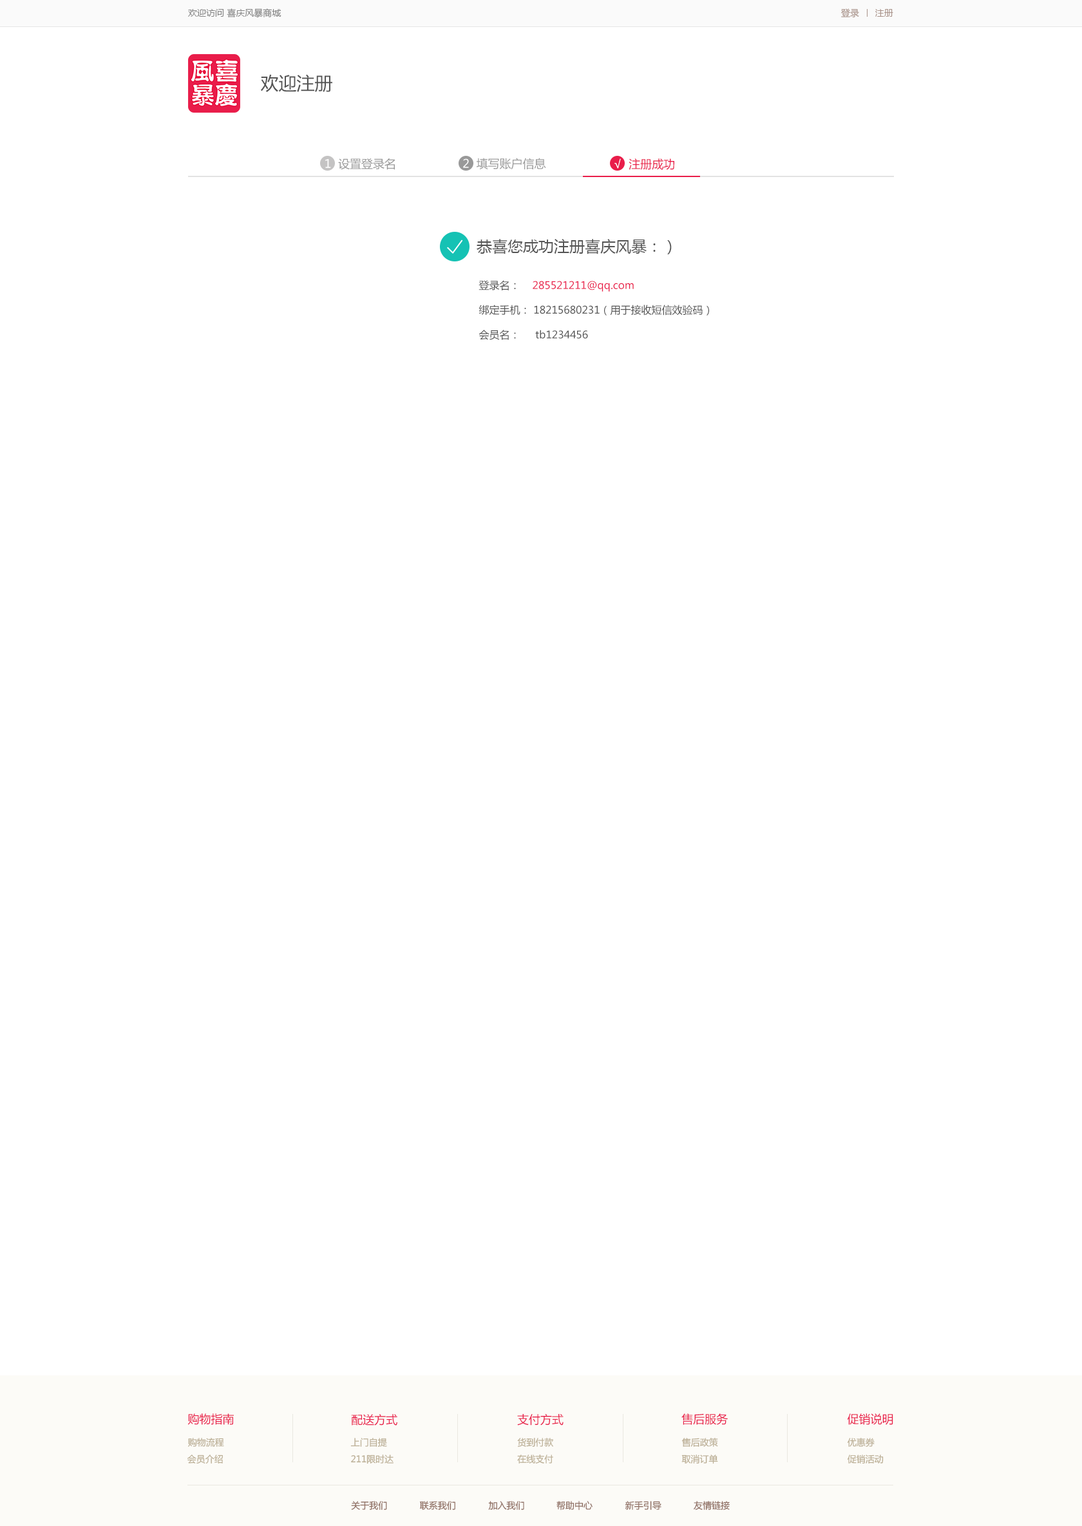
<style>
.page{position:relative;width:1082px;height:1526px;background:#ffffff}
.page>*{position:absolute;margin:0}
.t1{font:9px "MicrosoftYaHei";color:#848484}
.t2{font:9px "MicrosoftYaHei";color:#a99289}
.t3{font:18px "MicrosoftYaHei";color:#545454}
.t4{font:11.6px "MicrosoftYaHei";color:#999999}
.t5{font:11.6px "MicrosoftYaHei";color:#ffffff}
.t6{font:11.6px "MicrosoftYaHei";color:#e91d4a}
.t7{font:15.5px "MicrosoftYaHei";color:#545454}
.t8{font:10.3px "MicrosoftYaHei";color:#545454}
.t9{font:10.3px "MicrosoftYaHei";color:#e91d4a}
.t10{font:9px "MicrosoftYaHei";color:#baad93}
.t11{font:9px "MicrosoftYaHei";color:#8c6a5e}
</style>
<div class="page">
<p class="t1" style="left:188px;top:8px;width:93px;height:9px">欢迎访问 喜庆风暴商城</p>
<p class="t2" style="left:841px;top:8px;width:52px;height:9px">登录      注册</p>
<p class="t3" style="left:261px;top:74px;width:71px;height:18px">欢迎注册</p>
<p class="t4" style="left:325px;top:158px;width:70px;height:12px"><span class="t5">1  </span>设置登录名</p>
<p class="t4" style="left:463px;top:158px;width:83px;height:11px"><span class="t5">2  </span>填写账户信息</p>
<p class="t6" style="left:614px;top:158px;width:60px;height:12px"><span class="t5">√  </span>注册成功</p>
<p class="t7" style="left:477px;top:239px;width:195px;height:15px">恭喜您成功注册喜庆风暴：）</p>
<p class="t8" style="left:478px;top:280px;width:231px;height:60px">登录名：    <span class="t9">285521211@qq.com<br><br></span>绑定手机： 18215680231（用于接收短信效验码）<br><br>会员名：     tb1234456</p>
<p class="t6" style="left:187px;top:1413px;width:47px;height:12px">购物指南</p>
<p class="t6" style="left:351px;top:1414px;width:46px;height:12px">配送方式</p>
<p class="t6" style="left:517px;top:1414px;width:46px;height:12px">支付方式</p>
<p class="t6" style="left:681px;top:1413px;width:47px;height:12px">售后服务</p>
<p class="t6" style="left:847px;top:1413px;width:46px;height:12px">促销说明</p>
<p class="t10" style="left:188px;top:1438px;width:36px;height:9px">购物流程</p>
<p class="t10" style="left:350px;top:1438px;width:37px;height:9px">上门自提</p>
<p class="t10" style="left:517px;top:1438px;width:36px;height:10px">货到付款</p>
<p class="t10" style="left:681px;top:1438px;width:37px;height:9px">售后政策</p>
<p class="t10" style="left:847px;top:1438px;width:27px;height:9px">优惠券</p>
<p class="t10" style="left:187px;top:1455px;width:36px;height:9px">会员介绍</p>
<p class="t10" style="left:351px;top:1455px;width:43px;height:9px">211限时达</p>
<p class="t10" style="left:517px;top:1455px;width:36px;height:9px">在线支付</p>
<p class="t10" style="left:681px;top:1455px;width:37px;height:9px">取消订单</p>
<p class="t10" style="left:847px;top:1455px;width:37px;height:9px">促销活动</p>
<p class="t11" style="left:351px;top:1501px;width:36px;height:9px">关于我们</p>
<p class="t11" style="left:419px;top:1501px;width:36px;height:9px">联系我们</p>
<p class="t11" style="left:488px;top:1501px;width:36px;height:9px">加入我们</p>
<p class="t11" style="left:556px;top:1501px;width:36px;height:10px">帮助中心</p>
<p class="t11" style="left:625px;top:1501px;width:36px;height:9px">新手引导</p>
<p class="t11" style="left:694px;top:1501px;width:36px;height:9px">友情链接</p>
</div>
